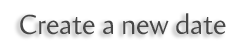
<style>
.page{position:relative;width:246px;height:48px;background:#ffffff}
.page>*{position:absolute;margin:0}
.t1{font:28px "Amira-Roman";color:#474747}
</style>
<div class="page">
<p class="t1" style="left:20px;top:13px;width:206px;height:22px">Create a new date</p>
</div>
